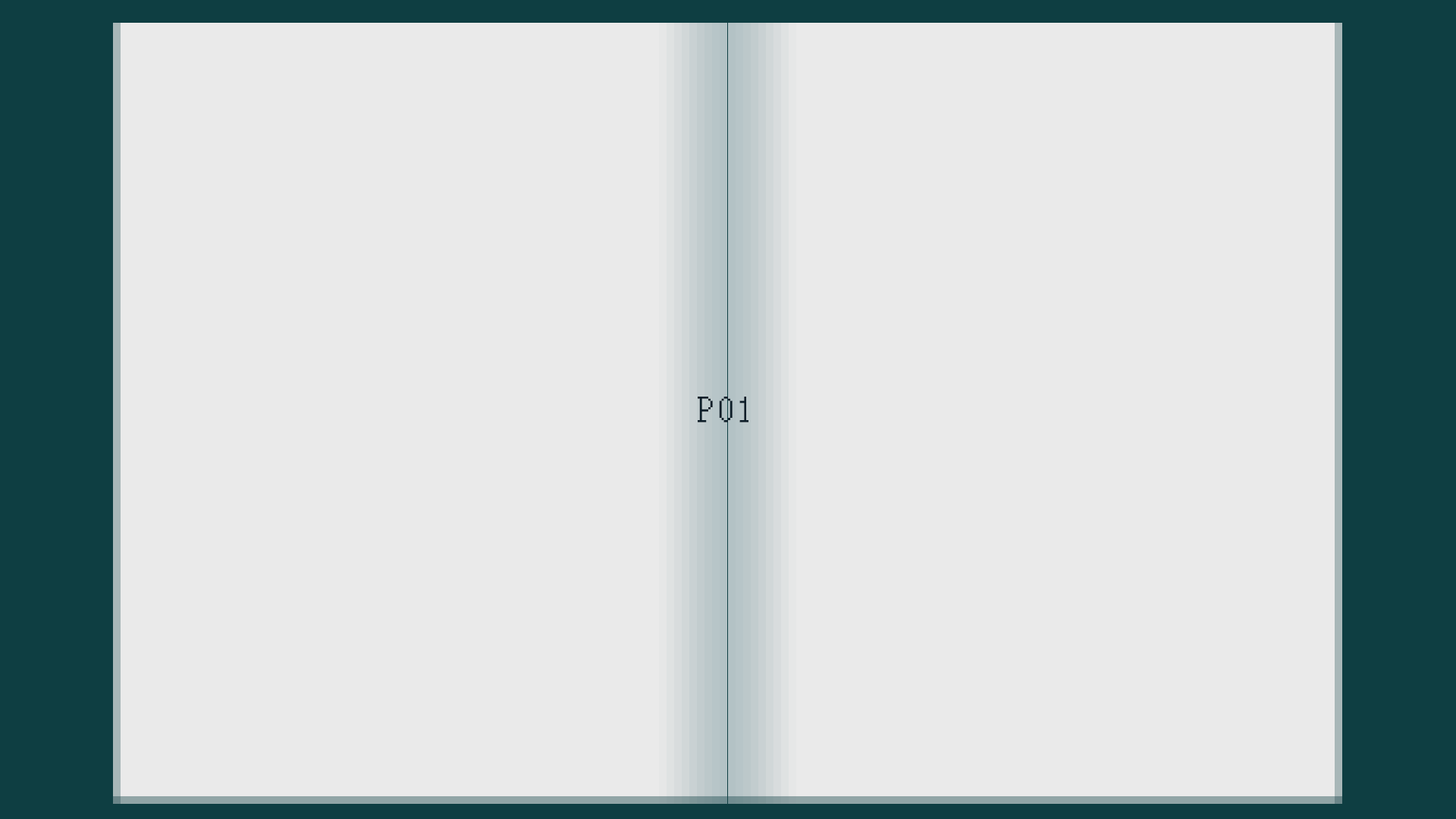
<style>
.page{position:relative;width:1456px;height:819px;background:#eaeaea}
.page>*{position:absolute;margin:0}
.t1{font:34.1px "KH-Dot-kagurazaka-16";letter-spacing:0.12em;color:#0a192d}
</style>
<div class="page">
<p class="t1" style="left:698px;top:397px;width:50px;height:25px">P01</p>
</div>
